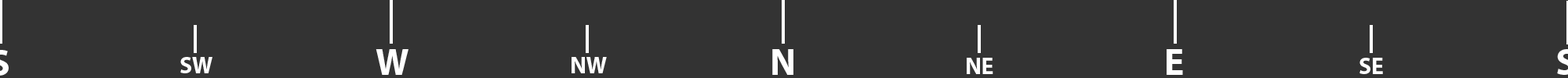
<style>
.page{position:relative;width:1568px;height:78px;background:#333333}
.page>*{position:absolute;margin:0}
.t1{font:37.6px "MyriadPro-Bold";color:#ffffff}
.t2{font:23.5px "MyriadPro-Bold";color:#ffffff}
</style>
<div class="page">
<p class="t1" style="left:376px;top:49px;width:32px;height:26px">W</p>
<p class="t1" style="left:772px;top:49px;width:21px;height:26px">N</p>
<p class="t1" style="left:1167px;top:49px;width:16px;height:26px">E</p>
<p class="t2" style="left:180px;top:57px;width:32px;height:17px">SW</p>
<p class="t2" style="left:572px;top:57px;width:35px;height:17px">NW</p>
<p class="t2" style="left:967px;top:58px;width:26px;height:16px">NE</p>
<p class="t2" style="left:1359px;top:58px;width:24px;height:16px">SE</p>
</div>
